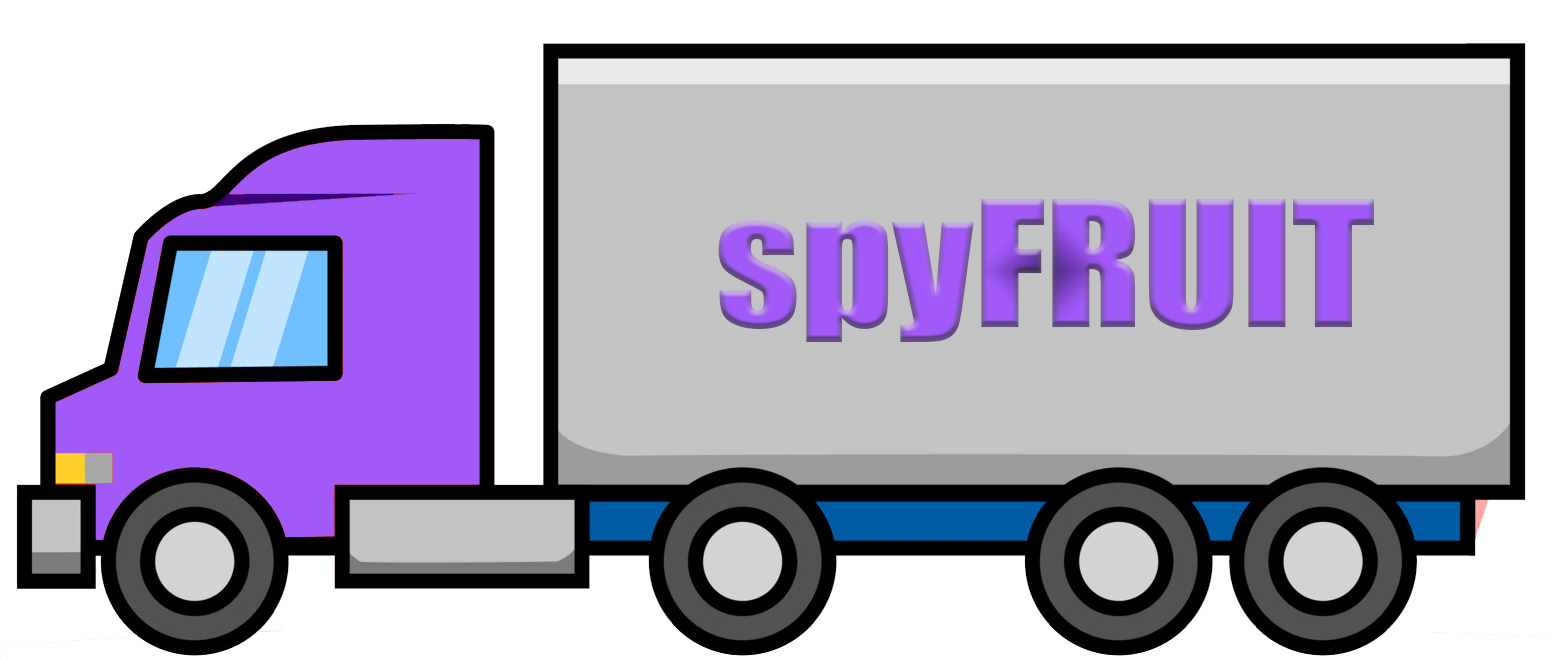
<style>
.page{position:relative;width:1552px;height:660px;background:#c3c3c3}
.page>*{position:absolute;margin:0}
.t1{font:161.5px "Impact";scale:1.11 1}
</style>
<div class="page">
<p class="t1" style="left:718px;top:199px;width:656px;height:143px">spyFRUIT</p>
</div>
